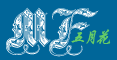
<style>
.page{position:relative;width:117px;height:60px;background:#006699}
.page>*{position:absolute;margin:0}
.t1{font:61px "RoyalInitialen";color:#ffffff}
.t2{font:61px "RoyalInitialen";color:#ffffff;font-style:italic}
.t3{font:16px "STXingkai";letter-spacing:-0.2em;color:#66cc66;font-style:italic}
</style>
<div class="page">
<p class="t1" style="left:6px;top:7px;width:45px;height:48px">M</p>
<p class="t2" style="left:49px;top:8px;width:50px;height:49px">F</p>
<p class="t3" style="left:71px;top:29px;width:40px;height:16px">五月花</p>
</div>
